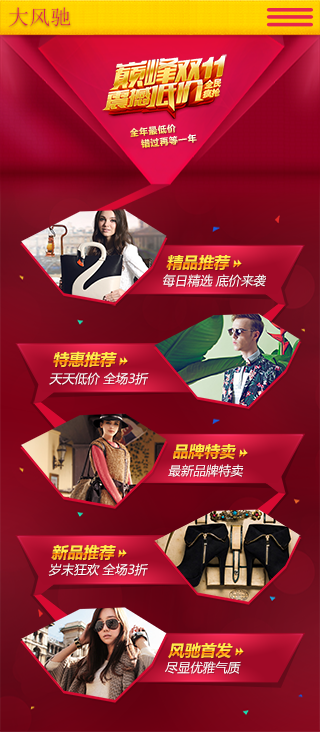
<style>
.page{position:relative;width:320px;height:734px}
.page>*{position:absolute;margin:0}
.t1{font:21.3px "NSimSun";color:#de244c}
.t2{font:8.9px "MicrosoftYaHei-Bold";letter-spacing:0.05em}
.t3{font:15.6px "MicrosoftYaHei-Bold";font-style:italic}
.t4{font:12.5px "MicrosoftYaHei";color:#ffffff;font-style:italic}
</style>
<div class="page">
<p class="t1" style="left:8px;top:7px;width:63px;height:20px">大风驰</p>
<p class="t2" style="left:130px;top:124px;width:46px;height:13px;rotate:-6deg">全年最低价</p>
<p class="t2" style="left:141px;top:134px;width:56px;height:14px;rotate:-6deg">错过再等一年</p>
<p class="t3" style="left:166px;top:254px;width:65px;height:16px">精品推荐</p>
<p class="t4" style="left:163px;top:274px;width:103px;height:13px">每日精选 底价来袭</p>
<p class="t3" style="left:53px;top:351px;width:64px;height:16px">特惠推荐</p>
<p class="t4" style="left:49px;top:372px;width:100px;height:13px">天天低价 全场3折</p>
<p class="t3" style="left:173px;top:443px;width:63px;height:17px">品牌特卖</p>
<p class="t4" style="left:168px;top:464px;width:76px;height:13px">最新品牌特卖</p>
<p class="t3" style="left:51px;top:544px;width:65px;height:16px">新品推荐</p>
<p class="t4" style="left:48px;top:563px;width:100px;height:13px">岁末狂欢 全场3折</p>
<p class="t3" style="left:168px;top:642px;width:65px;height:17px">风驰首发</p>
<p class="t4" style="left:165px;top:661px;width:76px;height:13px">尽显优雅气质</p>
</div>
